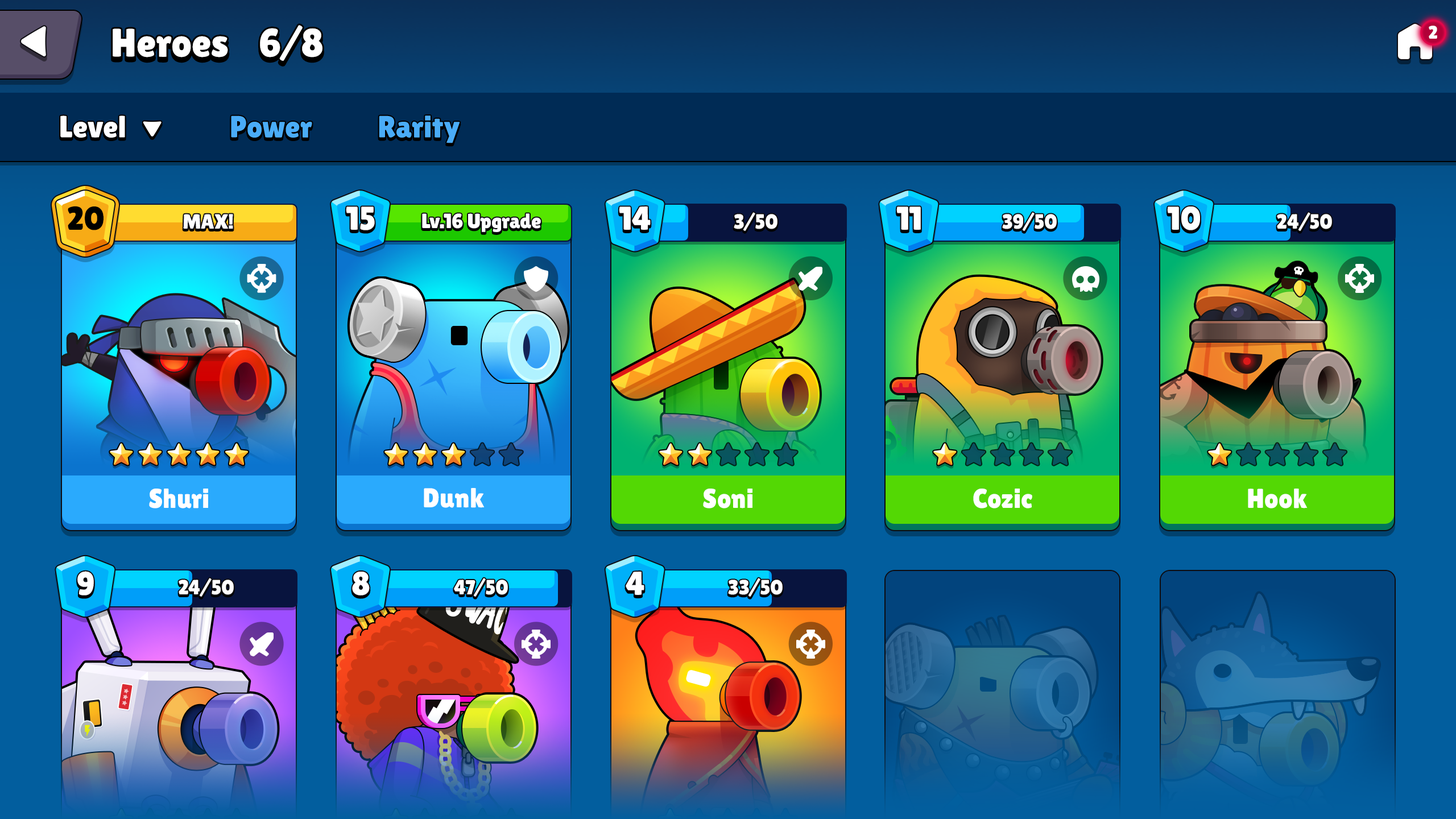
<style>
.page{position:relative;width:1456px;height:819px}
.page>*{position:absolute;margin:0}
.t1{font:39.8px "LilitaOne";color:#ffffff}
.t2{font:18.2px "LilitaOne";color:#ffffff;text-transform:uppercase}
.t3{font:30.7px "LilitaOne";color:#ffffff}
.t4{font:30.7px "LilitaOne";color:#4aacf7}
.t5{font:33px "LilitaOne";color:#000000;text-transform:uppercase}
.t6{font:33px "LilitaOne";color:#ffffff;text-transform:uppercase}
.t7{font:20.5px "LilitaOne";color:#ffffff;text-transform:uppercase}
.t8{font:20.5px "LilitaOne";color:#ffffff}
.t9{font:27.3px "LilitaOne";color:#ffffff}
</style>
<div class="page">
<p class="t1" style="left:113px;top:28px;width:115px;height:29px">Heroes</p>
<p class="t1" style="left:260px;top:25px;width:62px;height:36px">6/8</p>
<p class="t2" style="left:1429px;top:26px;width:8px;height:13px">2</p>
<p class="t3" style="left:60px;top:115px;width:65px;height:23px">Level</p>
<p class="t4" style="left:231px;top:115px;width:81px;height:23px">Power</p>
<p class="t4" style="left:379px;top:115px;width:81px;height:28px">Rarity</p>
<p class="t5" style="left:68px;top:206px;width:36px;height:24px">20</p>
<p class="t6" style="left:346px;top:206px;width:29px;height:24px">15</p>
<p class="t6" style="left:619px;top:206px;width:32px;height:24px">14</p>
<p class="t6" style="left:896px;top:206px;width:25px;height:24px">11</p>
<p class="t6" style="left:1167px;top:206px;width:33px;height:24px">10</p>
<p class="t7" style="left:183px;top:214px;width:50px;height:15px">MAX!</p>
<p class="t8" style="left:422px;top:213px;width:119px;height:19px">Lv.16 Upgrade</p>
<p class="t7" style="left:734px;top:212px;width:43px;height:19px">3/50</p>
<p class="t7" style="left:1002px;top:212px;width:55px;height:19px">39/50</p>
<p class="t7" style="left:1277px;top:212px;width:55px;height:19px">24/50</p>
<p class="t9" style="left:149px;top:489px;width:59px;height:19px">Shuri</p>
<p class="t9" style="left:424px;top:488px;width:61px;height:20px">Dunk</p>
<p class="t9" style="left:703px;top:489px;width:49px;height:19px">Soni</p>
<p class="t9" style="left:973px;top:489px;width:59px;height:19px">Cozic</p>
<p class="t9" style="left:1248px;top:489px;width:60px;height:19px">Hook</p>
<p class="t6" style="left:77px;top:571px;width:17px;height:24px">9</p>
<p class="t7" style="left:179px;top:578px;width:55px;height:19px">24/50</p>
<p class="t6" style="left:352px;top:572px;width:18px;height:23px">8</p>
<p class="t7" style="left:454px;top:578px;width:54px;height:19px">47/50</p>
<p class="t6" style="left:626px;top:572px;width:18px;height:23px">4</p>
<p class="t7" style="left:728px;top:578px;width:55px;height:19px">33/50</p>
</div>
